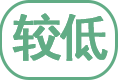
<style>
.page{position:relative;width:120px;height:80px;background:#ffffff}
.page>*{position:absolute;margin:0}
.t1{font:50px "SimHei";color:#61ac85;text-transform:uppercase;font-weight:bold}
</style>
<div class="page">
<p class="t1" style="left:12px;top:13px;width:49px;height:48px">较</p>
<p class="t1" style="left:12px;top:13px;width:49px;height:48px">较</p>
<p class="t1" style="left:60px;top:14px;width:48px;height:47px">低</p>
<p class="t1" style="left:60px;top:14px;width:48px;height:47px">低</p>
</div>
